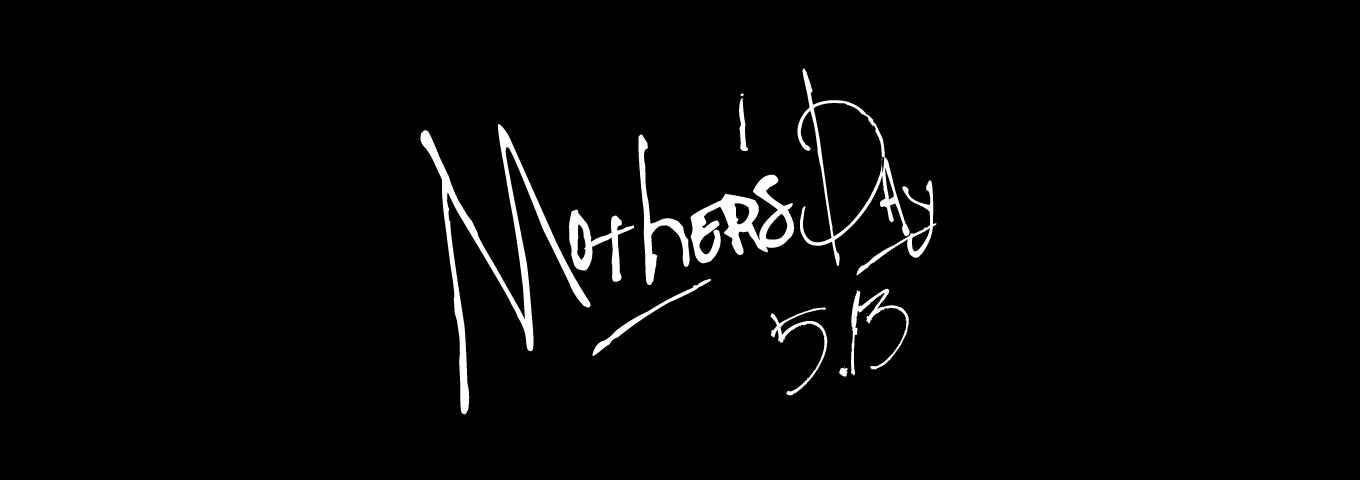
<style>
.page{position:relative;width:1360px;height:480px;background:#000000}
.page>*{position:absolute;margin:0}
.t1{font:289.4px "Pappo'sBluesBandOfficialFont";letter-spacing:-0.01em;color:#ffffff}
.t2{font:195.1px "Pappo'sBluesBandOfficialFont";letter-spacing:-0.01em;color:#ffffff}
.t3{font:120px "JellykaBeesAntiqueHandwriting";letter-spacing:-0.01em;color:#ffffff}
</style>
<div class="page">
<p class="t1" style="left:420px;top:68px;width:517px;height:347px;rotate:-12deg">Mother's<span class="t2">Day</span></p>
<p class="t3" style="left:770px;top:288px;width:139px;height:108px;rotate:-12deg">5.13</p>
</div>
